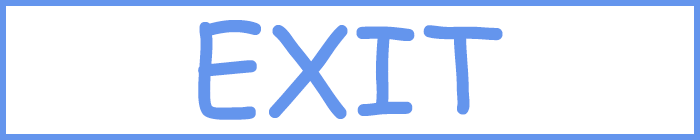
<style>
.page{position:relative;width:700px;height:140px;background:#ffffff}
.page>*{position:absolute;margin:0}
.t1{font:120px "ComicSansMS";color:#6495ed}
</style>
<div class="page">
<p class="t1" style="left:198px;top:20px;width:305px;height:100px">EXIT</p>
</div>
